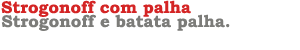
<style>
.page{position:relative;width:300px;height:50px;background:#ffffff}
.page>*{position:absolute;margin:0}
.t1{font:17px "BookmanOldStyle-Bold";color:#d42525}
.t2{font:17px "BookmanOldStyle-Bold";color:#7c7c79}
</style>
<div class="page">
<p class="t1" style="left:1px;top:0px;width:190px;height:17px">Strogonoff com palha</p>
<p class="t2" style="left:1px;top:14px;width:229px;height:17px">Strogonoff e batata palha.</p>
</div>
